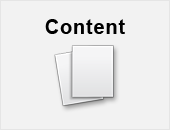
<style>
.page{position:relative;width:170px;height:130px;background:#f2f2f2}
.page>*{position:absolute;margin:0}
.t1{font:20px "Arial-BoldMT";letter-spacing:0.04em;color:#000000}
</style>
<div class="page">
<p class="t1" style="left:45px;top:19px;width:80px;height:15px">Content</p>
</div>
